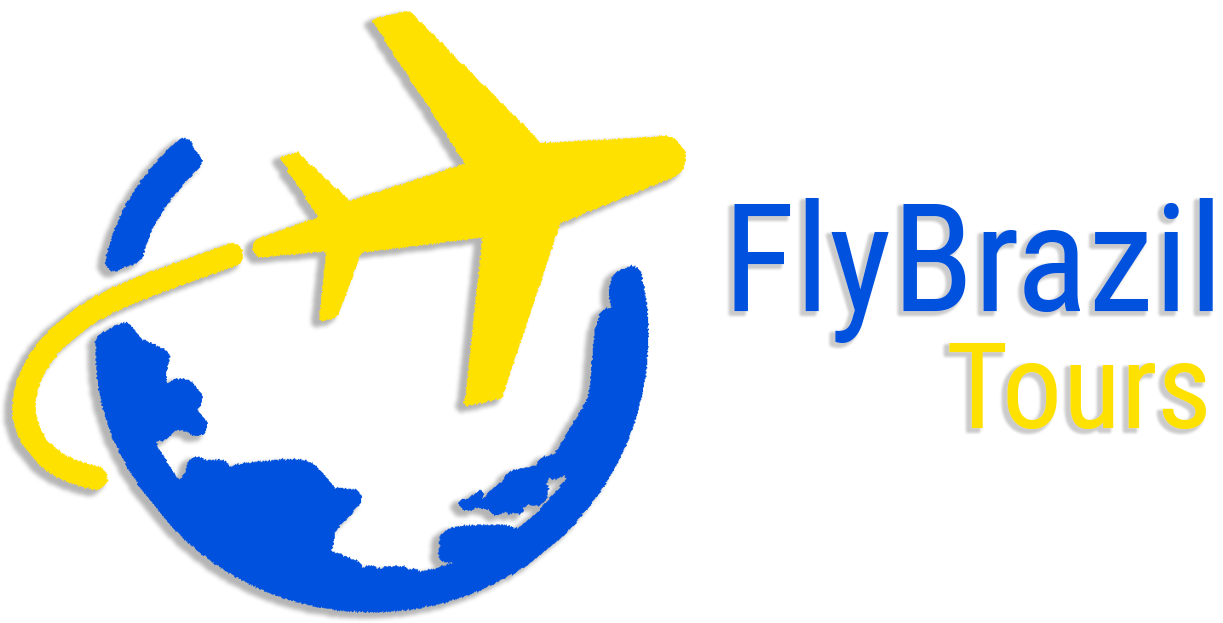
<style>
.page{position:relative;width:1223px;height:623px;background:#ffffff}
.page>*{position:absolute;margin:0}
.t1{font:150px "RobotoCondensed-Regular";color:#0051de}
.t2{font:120px "RobotoCondensed-Regular";color:#ffe100}
</style>
<div class="page">
<p class="t1" style="left:734px;top:198px;width:479px;height:145px">FlyBrazil</p>
<p class="t2" style="left:949px;top:343px;width:257px;height:86px">Tours</p>
</div>
